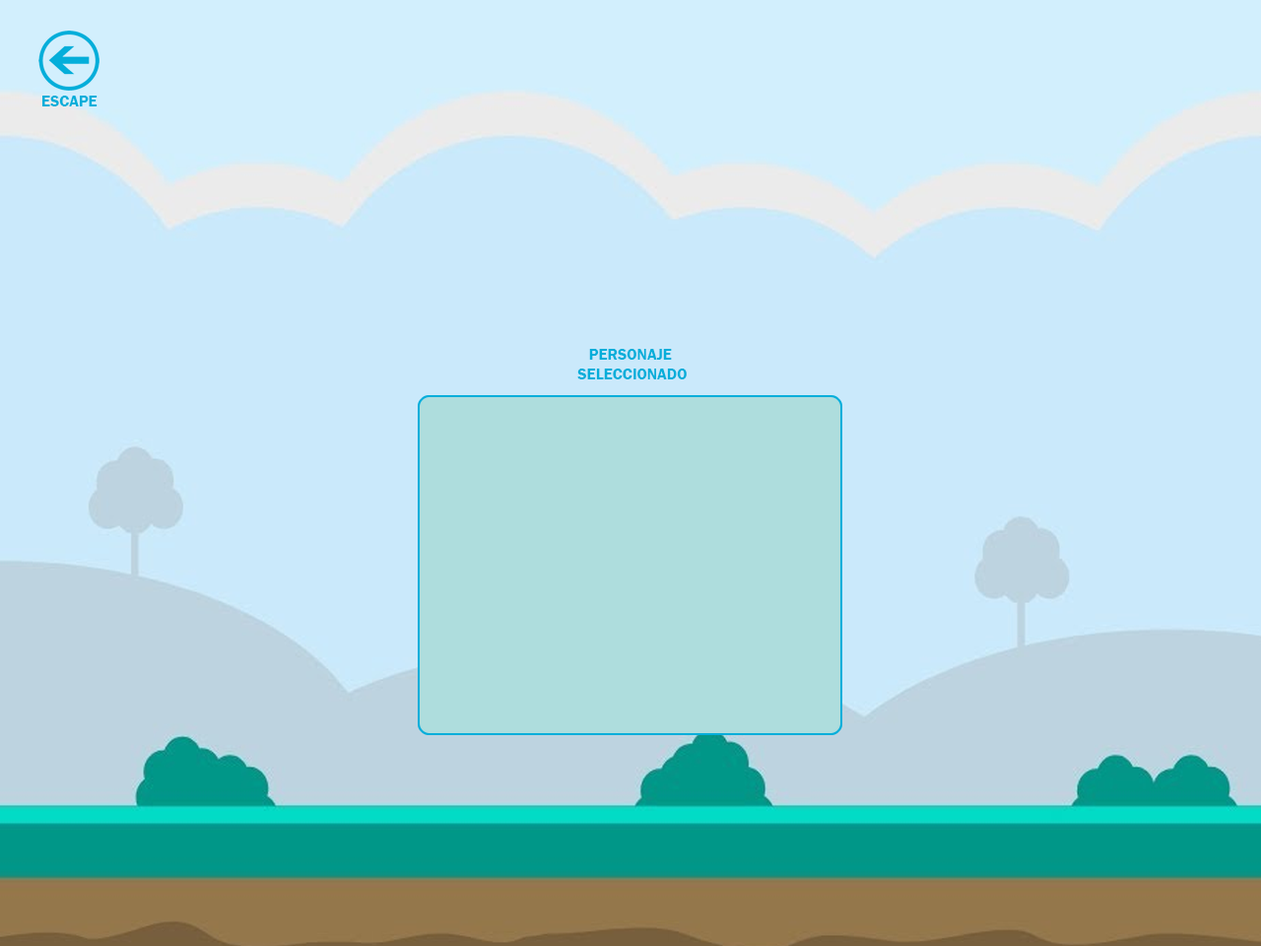
<style>
.page{position:relative;width:1261px;height:946px;background:#cae9fb}
.page>*{position:absolute;margin:0}
.t1{font:15.8px "FranklinGothic-Demi";color:#04aeda}
</style>
<div class="page">
<p class="t1" style="left:42px;top:96px;width:56px;height:10px">ESCAPE</p>
<p class="t1" style="left:577px;top:349px;width:110px;height:30px;text-align:center">PERSONAJE<br> SELECCIONADO</p>
</div>
